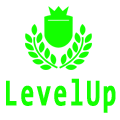
<style>
.page{position:relative;width:120px;height:120px;background:#ffffff}
.page>*{position:absolute;margin:0}
.t1{font:38px "Consolas-Bold";letter-spacing:0.05em;color:#13ff00;font-weight:bold;scale:0.66 1}
</style>
<div class="page">
<p class="t1" style="left:6px;top:78px;width:110px;height:35px">LevelUp</p>
</div>
